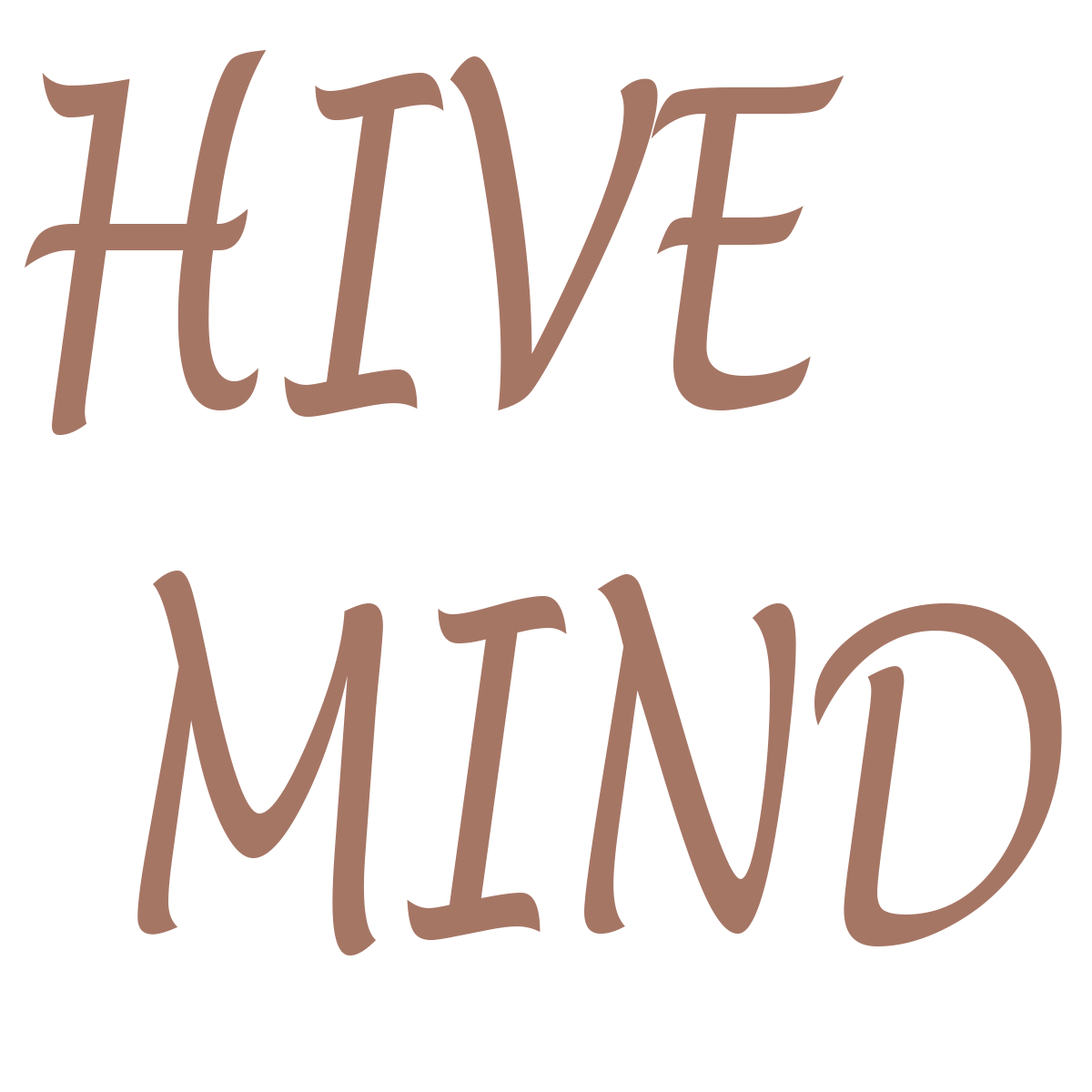
<style>
.page{position:relative;width:1092px;height:1092px;background:#ffffff}
.page>*{position:absolute;margin:0}
.t1{font:436.4px "LucidaHandwriting-Italic";color:#a67665;scale:0.69 1}
</style>
<div class="page">
<p class="t1" style="left:25px;top:50px;width:1037px;height:905px">HIVE<br> MIND</p>
</div>
